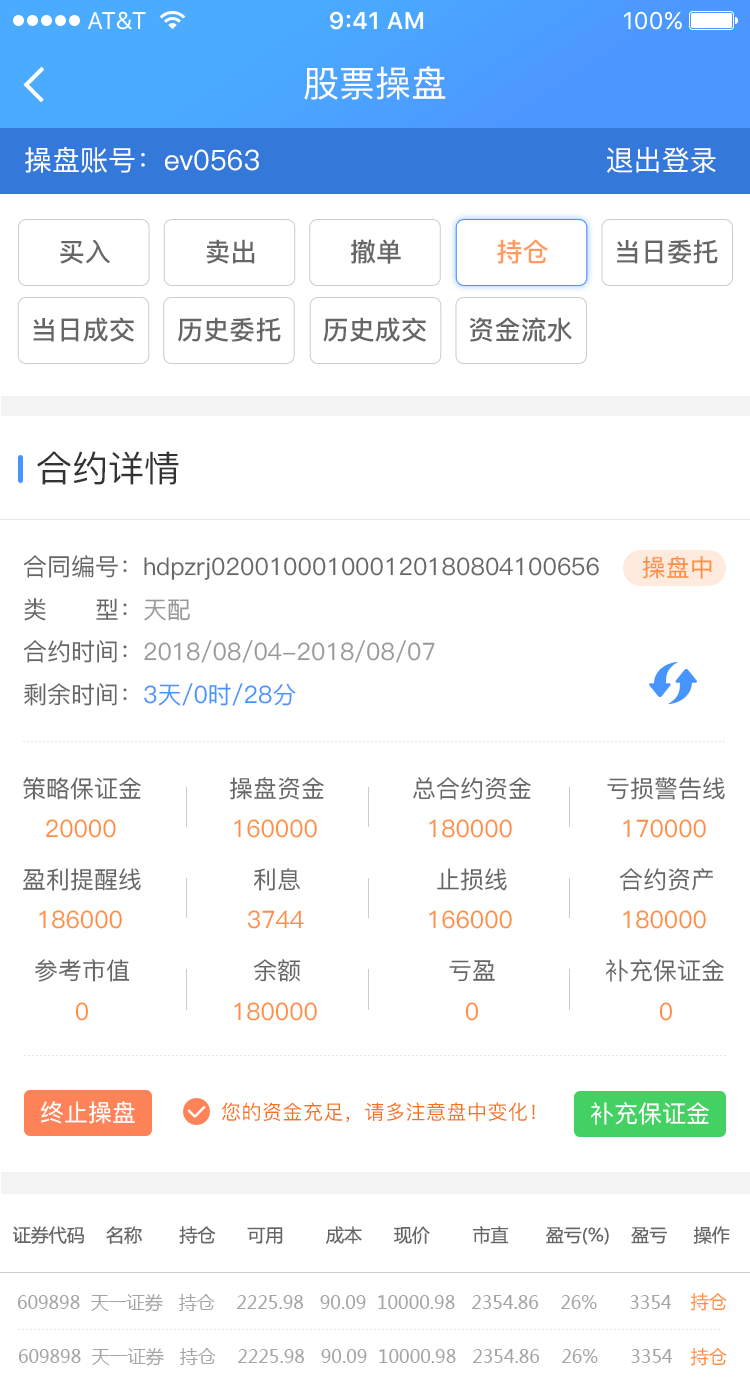
<style>
.page{position:relative;width:750px;height:1385px;background:#ffffff}
.page>*{position:absolute;margin:0}
.t1{font:36px "PingFang-SC-Medium";color:#ffffff}
.t2{font:28px "PingFang-SC-Medium";color:#ffffff}
.t3{font:26px "PingFang-SC-Bold";color:#666666}
.t4{font:26px "PingFang-SC-Bold";color:#ff9b5c}
.t5{font:36px "PingFang-SC-Medium";color:#333333}
.t6{font:24px "PingFang-SC-Medium";color:#666666}
.t7{font:24px "PingFang-SC-Medium";color:#ff8e42}
.t8{font:24px "PingFang-SC-Medium";color:#999999}
.t9{font:24px "PingFang-SC-Medium";color:#4794ff}
.t10{font:24px "PingFang-SC-Medium";color:#ffffff}
.t11{font:20px "PingFang-SC-Medium";letter-spacing:0.025em;color:#f77116}
.t12{font:18px "MicrosoftYaHei";color:#666666}
.t13{font:18px "MicrosoftYaHei";color:#a5a5a5}
.t14{font:18px "MicrosoftYaHei";color:#ff8e42}
</style>
<div class="page">
<p class="t1" style="left:304px;top:66px;width:142px;height:34px">股票操盘</p>
<p class="t2" style="left:25px;top:146px;width:691px;height:27px">操盘账号：ev0563                                     退出登录</p>
<p class="t3" style="left:60px;top:239px;width:50px;height:25px">买入</p>
<p class="t3" style="left:206px;top:239px;width:49px;height:25px">卖出</p>
<p class="t3" style="left:350px;top:239px;width:51px;height:25px">撤单</p>
<p class="t4" style="left:497px;top:239px;width:51px;height:25px">持仓</p>
<p class="t3" style="left:617px;top:239px;width:101px;height:25px">当日委托</p>
<p class="t3" style="left:33px;top:317px;width:101px;height:25px">当日成交</p>
<p class="t3" style="left:178px;top:317px;width:103px;height:25px">历史委托</p>
<p class="t3" style="left:323px;top:317px;width:103px;height:25px">历史成交</p>
<p class="t3" style="left:469px;top:317px;width:103px;height:25px">资金流水</p>
<p class="t5" style="left:37px;top:451px;width:142px;height:34px">合约详情</p>
<p class="t6" style="left:23px;top:555px;width:576px;height:25px">合同编号：hdpzrj020010001000120180804100656</p>
<p class="t7" style="left:642px;top:556px;width:70px;height:23px">操盘中</p>
<p class="t6" style="left:24px;top:598px;width:166px;height:23px">类      型：<span class="t8">天配</span></p>
<p class="t8" style="left:23px;top:640px;width:412px;height:23px"><span class="t6">合约时间：</span>2018/08/04-2018/08/07</p>
<p class="t9" style="left:24px;top:683px;width:272px;height:23px"><span class="t6">剩余时间：</span>3天/0时/28分</p>
<p class="t6" style="left:23px;top:777px;width:118px;height:23px">策略保证金</p>
<p class="t6" style="left:230px;top:777px;width:94px;height:23px">操盘资金</p>
<p class="t6" style="left:413px;top:777px;width:118px;height:23px">总合约资金</p>
<p class="t6" style="left:607px;top:777px;width:118px;height:23px">亏损警告线</p>
<p class="t7" style="left:46px;top:819px;width:70px;height:19px">20000</p>
<p class="t7" style="left:234px;top:819px;width:83px;height:19px">160000</p>
<p class="t7" style="left:429px;top:819px;width:83px;height:19px">180000</p>
<p class="t7" style="left:623px;top:819px;width:83px;height:19px">170000</p>
<p class="t6" style="left:23px;top:868px;width:118px;height:23px">盈利提醒线</p>
<p class="t6" style="left:254px;top:868px;width:46px;height:23px">利息</p>
<p class="t6" style="left:437px;top:868px;width:70px;height:23px">止损线</p>
<p class="t6" style="left:619px;top:868px;width:94px;height:23px">合约资产</p>
<p class="t7" style="left:39px;top:910px;width:83px;height:19px">186000</p>
<p class="t7" style="left:248px;top:910px;width:56px;height:19px">3744</p>
<p class="t7" style="left:429px;top:910px;width:83px;height:19px">166000</p>
<p class="t7" style="left:623px;top:910px;width:83px;height:19px">180000</p>
<p class="t6" style="left:35px;top:959px;width:95px;height:23px">参考市值</p>
<p class="t6" style="left:253px;top:959px;width:48px;height:23px">余额</p>
<p class="t6" style="left:449px;top:960px;width:46px;height:22px">亏盈</p>
<p class="t6" style="left:606px;top:959px;width:118px;height:23px">补充保证金</p>
<p class="t7" style="left:75px;top:1002px;width:14px;height:19px">0</p>
<p class="t7" style="left:234px;top:1002px;width:83px;height:19px">180000</p>
<p class="t7" style="left:465px;top:1002px;width:14px;height:19px">0</p>
<p class="t7" style="left:659px;top:1002px;width:14px;height:19px">0</p>
<p class="t10" style="left:41px;top:1101px;width:94px;height:23px">终止操盘</p>
<p class="t11" style="left:221px;top:1102px;width:314px;height:21px">您的资金充足，请多注意盘中变化！</p>
<p class="t10" style="left:591px;top:1102px;width:118px;height:23px">补充保证金</p>
<p class="t12" style="left:13px;top:1226px;width:717px;height:19px">证券代码    名称       持仓      可用        成本      现价        市直       盈亏(%)    盈亏     操作</p>
<p class="t13" style="left:17px;top:1294px;width:654px;height:18px">609898  天一证券   持仓    2225.98   90.09  10000.98   2354.86    26%      3354</p>
<p class="t14" style="left:691px;top:1292px;width:36px;height:19px">持仓</p>
<p class="t13" style="left:18px;top:1348px;width:654px;height:18px">609898  天一证券   持仓    2225.98   90.09  10000.98   2354.86    26%      3354</p>
<p class="t14" style="left:691px;top:1347px;width:36px;height:19px">持仓</p>
</div>
